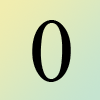
<style>
.page{position:relative;width:100px;height:100px}
.page>*{position:absolute;margin:0}
.t1{font:90px "TimesNewRomanPSMT";color:#000000}
</style>
<div class="page">
<p class="t1" style="left:32px;top:20px;width:39px;height:62px">0</p>
</div>
